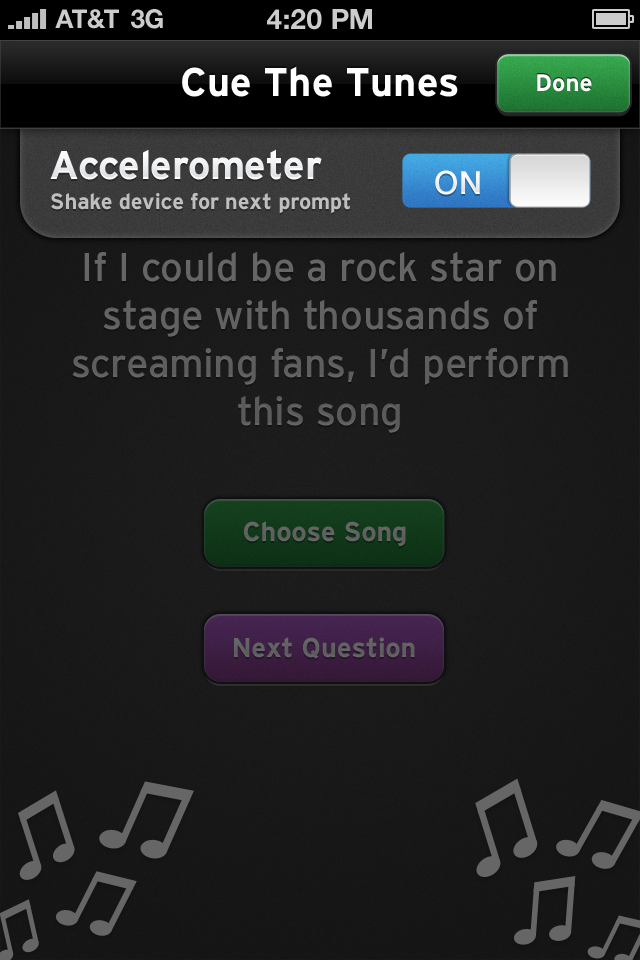
<style>
.page{position:relative;width:640px;height:960px}
.page>*{position:absolute;margin:0}
.t1{font:26px "HelveticaNeue-Bold";color:#cccccc;text-transform:uppercase}
.t2{font:28px "HelveticaNeue-Bold";color:#cccccc;text-transform:uppercase}
.t3{font:40px "Interstate-Bold";color:#ffffff}
.t4{font:24px "Interstate-Bold";color:#ffffff}
.t5{font:32px "HelveticaNeue-Medium";color:#ffffff}
.t6{font:22px "Interstate-Bold";color:#bfbfbf}
.t7{font:40px "Interstate-Regular";color:#626263}
.t8{font:27.1px "Interstate-Bold";color:#626363}
.t9{font:27.1px "Interstate-Bold";color:#626262}
</style>
<div class="page">
<p class="t1" style="left:55px;top:9px;width:64px;height:20px">AT&amp;T</p>
<p class="t1" style="left:131px;top:9px;width:32px;height:20px">3G</p>
<p class="t2" style="left:267px;top:9px;width:105px;height:21px">4:20 pM</p>
<p class="t3" style="left:182px;top:66px;width:276px;height:31px">Cue The Tunes</p>
<p class="t4" style="left:537px;top:74px;width:55px;height:18px">Done</p>
<p class="t3" style="left:50px;top:149px;width:272px;height:31px">Accelerometer</p>
<p class="t5" style="left:435px;top:170px;width:45px;height:25px">ON</p>
<p class="t6" style="left:51px;top:193px;width:299px;height:21px">Shake device for next prompt</p>
<p class="t7" style="left:72px;top:251px;width:496px;height:182px;text-align:center">If I could be a rock star on stage with thousands of screaming fans, I’d perform this song</p>
<p class="t8" style="left:244px;top:521px;width:162px;height:26px">Choose Song</p>
<p class="t9" style="left:234px;top:637px;width:181px;height:22px">Next Question</p>
</div>
